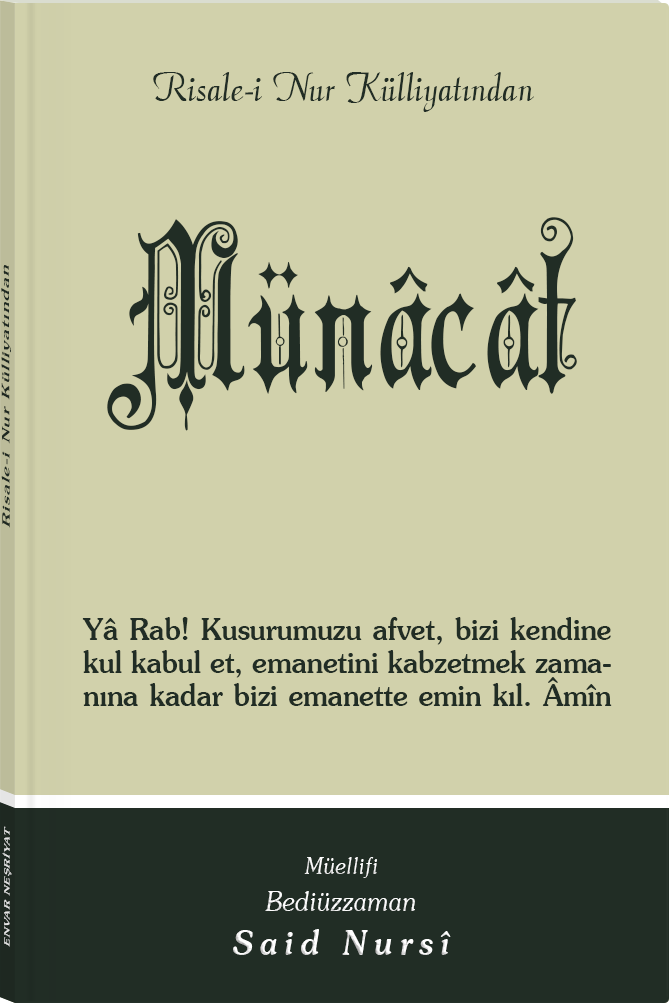
<style>
.page{position:relative;width:669px;height:1003px;background:#d1d1ab}
.page>*{position:absolute;margin:0}
.t1{font:45.3px "Barla © 072 Aria ScriptScriptSSi";color:#212d25;scale:0.94 1}
.t2{font:216.2px "Barla © 001 Liva Nur";letter-spacing:-0.001em;color:#212d25;scale:0.93 1}
.t3{font:11.4px "Souvenir-Medium";letter-spacing:0.08em;color:#212d25;scale:1.65 1}
.t4{font:30px/33px "Souvenir-Medium";color:#212d25;scale:0.92 1}
.t5{font:8.3px "Souvenir-Medium";letter-spacing:0.08em;color:#e5e5e5;scale:1.43 1}
.t6{font:27.1px/37.8px "Souvenir-LightItalic";color:#ffffff;scale:0.92 1}
.t7{font:22.8px/39.8px "Souvenir-LightItalic";color:#ffffff;scale:0.92 1}
.t8{font:33.9px/43.8px "Souvenir-MediumItalic";letter-spacing:0.2em;color:#ffffff;scale:0.92 1}
</style>
<div class="page">
<p class="t1" style="left:153px;top:72px;width:381px;height:40px">Risale-i Nur Külliyatından</p>
<p class="t2" style="left:107px;top:217px;width:470px;height:214px">Münâcât</p>
<p class="t3" style="left:1px;top:265px;width:10px;height:263px;rotate:-90deg">Risale-i Nur Külliyatından</p>
<p class="t4" style="left:82px;top:617px;width:530px;height:89px;text-align:justify">Yâ Rab! Kusurumuzu afvet, bizi kendine kul kabul et, emanetini kabzetmek zamanına kadar bizi emanette emin kıl. Âmîn</p>
<p class="t5" style="left:2px;top:826px;width:10px;height:121px;rotate:-90deg">ENVAR NEŞRİYAT</p>
<p class="t6" style="left:233px;top:857px;width:218px;height:98px;text-align:center"><span class="t7">Müellifi<br></span>Bediüzzaman<br><span class="t8">Said Nursî</span></p>
</div>
